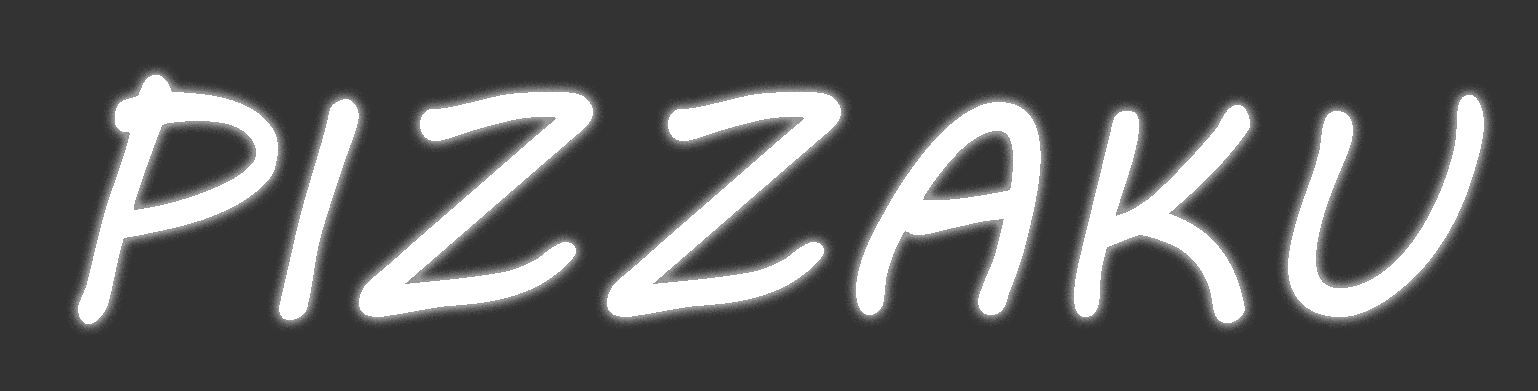
<style>
.page{position:relative;width:1538px;height:391px;background:#333333}
.page>*{position:absolute;margin:0}
.t1{font:300px "MVBoli";color:#ffffff}
</style>
<div class="page">
<p class="t1" style="left:78px;top:75px;width:1406px;height:249px">PIZZAKU</p>
</div>
